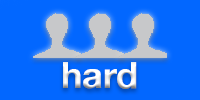
<style>
.page{position:relative;width:200px;height:100px;background:#0267ff}
.page>*{position:absolute;margin:0}
.t1{font:36px "HelveticaNeue-Bold";color:#ffffff}
</style>
<div class="page">
<p class="t1" style="left:63px;top:62px;width:74px;height:27px">hard</p>
</div>
